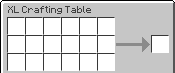
<style>
.page{position:relative;width:175px;height:73px;background:#ffffff}
.page>*{position:absolute;margin:0}
.t1{font:8px "Minecraftia-Regular";color:#3f3f3f}
</style>
<div class="page">
<p class="t1" style="left:8px;top:6px;width:83px;height:8px">XL Crafting Table</p>
</div>
